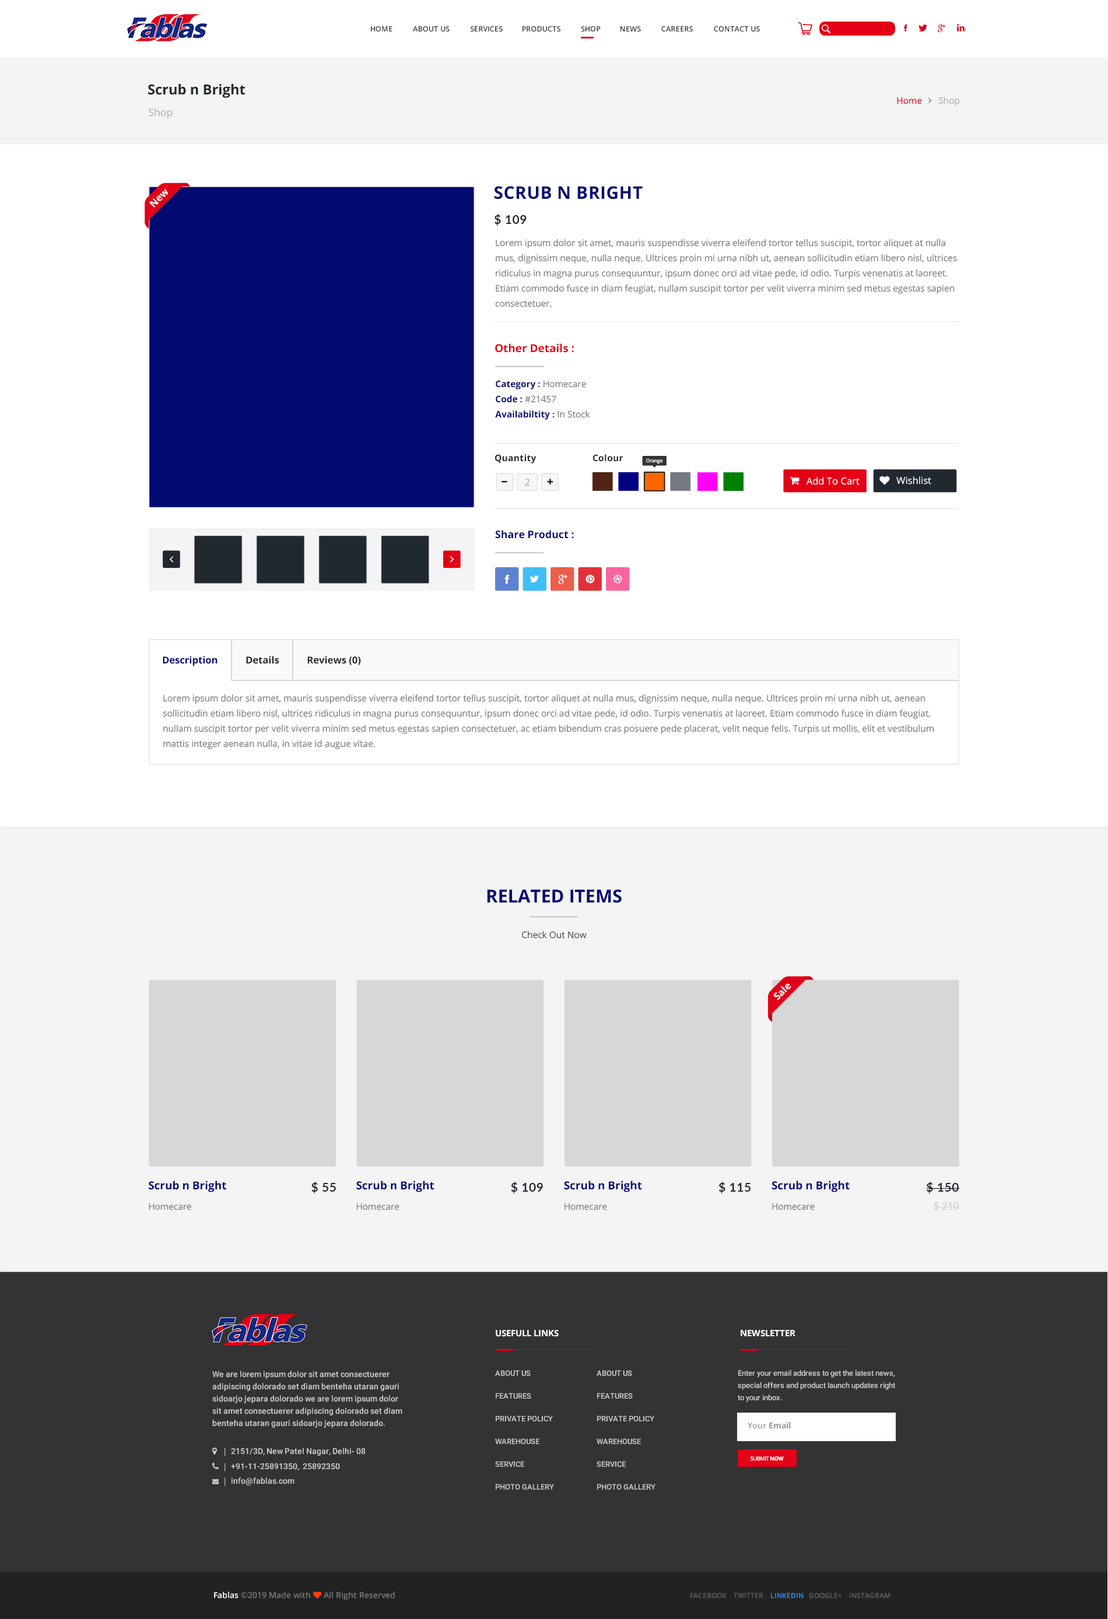
<style>
.page{position:relative;width:1108px;height:1619px;background:#ffffff}
.page>*{position:absolute;margin:0}
.t1{font:7.3px "OpenSans-SemiBold";color:#333333}
.t2{font:8px "OpenSans-SemiBold";color:#333333}
.t3{font:13.8px "OpenSans-Bold";color:#202830}
.t4{font:9px "OpenSans";color:#e30016}
.t5{font:9px "OpenSans";color:#afb0b4}
.t6{font:10.4px "OpenSans";color:#afb0b4}
.t7{font:17.3px "OpenSans-Bold";letter-spacing:0.02em;color:#000a71}
.t8{font:9.7px "OpenSans-Bold";color:#ffffff}
.t9{font:12.5px "Lato-Bold";letter-spacing:0.02em;color:#202830;text-transform:uppercase}
.t10{font:9px/15.2px "OpenSans";color:#7a7c82}
.t11{font:11.1px "OpenSans-Bold";color:#e30016}
.t12{font:9px/15.2px "OpenSans-Bold";color:#000a71}
.t13{font:9.7px/15.2px "Lato-Bold";color:#000a71}
.t14{font:9px "OpenSans-Bold";letter-spacing:0.025em;color:#202830}
.t15{font:4.8px "OpenSans";color:#ffffff}
.t16{font:9.7px "OpenSans";color:#acacac}
.t17{font:9.7px "OpenSans";color:#ffffff}
.t18{font:10.4px "OpenSans-Bold";color:#000a71}
.t19{font:9.7px "OpenSans-Bold";color:#202830}
.t20{font:9.7px "OpenSans-Bold";color:#000a71}
.t21{font:18px "OpenSans-Bold";color:#000a71;text-transform:uppercase}
.t22{font:9px "OpenSans";color:#4d5359}
.t23{font:11.1px "OpenSans-Bold";color:#000a71}
.t24{font:12.5px "Lato-Bold";letter-spacing:0.02em;color:#202830}
.t25{font:9px "OpenSans";color:#7a7c82}
.t26{font:9.7px "Lato-Regular";letter-spacing:0.02em;color:#cbcbcb}
.t27{font:8.7px "OpenSans-Bold";color:#ffffff}
.t28{font:8.2px/12.2px "Roboto-Medium";color:#cccccc}
.t29{font:7.6px/22.7px "Roboto-Medium";color:#cccccc}
.t30{font:7.6px/12.1px "Roboto-Medium";color:#cccccc}
.t31{font:8.2px "OpenSans-Bold";color:#999999}
.t32{font:8.2px "OpenSans-SemiBold";color:#999999}
.t33{font:5.4px "OpenSans";letter-spacing:-0.04em;color:#ffffff}
.t34{font:5.4px "OpenSans-Bold";letter-spacing:-0.04em;color:#ffffff}
.t35{font:7px "OpenSans-SemiBold";color:#616161}
.t36{font:7px "OpenSans-SemiBold";color:#2692ff}
</style>
<div class="page">
<p class="t1" style="left:371px;top:26px;width:21px;height:5px">HOME</p>
<p class="t1" style="left:413px;top:26px;width:37px;height:5px"><span class="t2">                     </span>ABOUT US</p>
<p class="t1" style="left:471px;top:26px;width:32px;height:5px"><span class="t2">                                                 </span>SERVICES</p>
<p class="t1" style="left:522px;top:26px;width:38px;height:5px"><span class="t2">                                                                                </span>PRODUCTS</p>
<p class="t1" style="left:581px;top:26px;width:20px;height:5px"><span class="t2">                                                                                                              </span>SHOP</p>
<p class="t1" style="left:620px;top:26px;width:21px;height:5px"><span class="t2">                                                                                                                                   </span>NEWS</p>
<p class="t1" style="left:661px;top:26px;width:32px;height:5px"><span class="t2">                                                                                                                                                          </span>CAREERS</p>
<p class="t1" style="left:714px;top:26px;width:46px;height:5px"><span class="t2">                                                                                                                                                                                       </span>CONTACT US</p>
<p class="t3" style="left:148px;top:84px;width:97px;height:14px">Scrub n Bright</p>
<p class="t4" style="left:897px;top:97px;width:63px;height:9px">Home<span class="t5">       Shop</span></p>
<p class="t6" style="left:149px;top:108px;width:24px;height:11px">Shop</p>
<p class="t7" style="left:494px;top:186px;width:149px;height:13px">SCRUB N BRIGHT</p>
<p class="t8" style="left:149px;top:188px;width:19px;height:20px;rotate:-45deg">New</p>
<p class="t9" style="left:494px;top:214px;width:32px;height:12px">$ 109</p>
<p class="t10" style="left:495px;top:239px;width:462px;height:68px">Lorem ipsum dolor sit amet, mauris suspendisse viverra eleifend tortor tellus suscipit, tortor aliquet at nulla mus, dignissim neque, nulla neque. Ultrices proin mi urna nibh ut, aenean sollicitudin etiam libero nisl, ultrices ridiculus in magna purus consequuntur, ipsum donec orci ad vitae pede, id odio. Turpis venenatis at laoreet. Etiam commodo fusce in diam feugiat, nullam suscipit tortor per velit viverra minim sed metus egestas sapien consectetuer.</p>
<p class="t11" style="left:495px;top:343px;width:79px;height:10px">Other Details :</p>
<p class="t12" style="left:495px;top:380px;width:95px;height:40px">Category <span class="t13">: </span><span class="t10">Homecare<br></span>Code <span class="t13">: </span><span class="t10">#21457<br></span>Availabiltity <span class="t13">: </span><span class="t10">In Stock</span></p>
<p class="t14" style="left:495px;top:454px;width:41px;height:10px">Quantity</p>
<p class="t14" style="left:593px;top:454px;width:30px;height:8px">Colour</p>
<p class="t15" style="left:646px;top:458px;width:17px;height:6px">Orange</p>
<p class="t16" style="left:525px;top:478px;width:5px;height:8px">2</p>
<p class="t17" style="left:806px;top:477px;width:53px;height:8px">Add To Cart</p>
<p class="t17" style="left:896px;top:476px;width:35px;height:9px">Wishlist</p>
<p class="t18" style="left:495px;top:530px;width:79px;height:9px">Share Product :</p>
<p class="t19" style="left:163px;top:656px;width:198px;height:10px"><span class="t20">Description</span>           Details           Reviews (0)</p>
<p class="t10" style="left:163px;top:694px;width:771px;height:55px">Lorem ipsum dolor sit amet, mauris suspendisse viverra eleifend tortor tellus suscipit, tortor aliquet at nulla mus, dignissim neque, nulla neque. Ultrices proin mi urna nibh ut, aenean sollicitudin etiam libero nisl, ultrices ridiculus in magna purus consequuntur, ipsum donec orci ad vitae pede, id odio. Turpis venenatis at laoreet. Etiam commodo fusce in diam feugiat, nullam suscipit tortor per velit viverra minim sed metus egestas sapien consectetuer, ac etiam bibendum cras posuere pede placerat, velit neque felis. Turpis ut mollis, elit et vestibulum mattis integer aenean nulla, in vitae id augue vitae.</p>
<p class="t21" style="left:487px;top:889px;width:135px;height:14px">Related Items</p>
<p class="t22" style="left:522px;top:931px;width:65px;height:8px">Check Out Now</p>
<p class="t8" style="left:774px;top:984px;width:17px;height:16px;rotate:-45deg">Sale</p>
<p class="t23" style="left:149px;top:1181px;width:77px;height:11px">Scrub n Bright</p>
<p class="t9" style="left:311px;top:1182px;width:25px;height:11px">$ 55</p>
<p class="t23" style="left:356px;top:1181px;width:78px;height:11px">Scrub n Bright</p>
<p class="t9" style="left:511px;top:1182px;width:32px;height:11px">$ 109</p>
<p class="t23" style="left:564px;top:1181px;width:78px;height:11px">Scrub n Bright</p>
<p class="t9" style="left:718px;top:1182px;width:32px;height:11px">$ 115</p>
<p class="t23" style="left:771px;top:1181px;width:78px;height:11px">Scrub n Bright</p>
<p class="t24" style="left:926px;top:1182px;width:34px;height:11px">$ 150</p>
<p class="t25" style="left:149px;top:1203px;width:43px;height:7px">Homecare</p>
<p class="t25" style="left:356px;top:1203px;width:43px;height:7px">Homecare</p>
<p class="t25" style="left:564px;top:1203px;width:43px;height:7px">Homecare</p>
<p class="t25" style="left:772px;top:1203px;width:43px;height:7px">Homecare</p>
<p class="t26" style="left:933px;top:1201px;width:27px;height:10px">$ 210</p>
<p class="t27" style="left:496px;top:1330px;width:63px;height:7px">USEFULL LINKS</p>
<p class="t27" style="left:740px;top:1330px;width:55px;height:7px">NEWSLETTER</p>
<p class="t28" style="left:212px;top:1371px;width:190px;height:57px">We are lorem ipsum dolor sit amet consectuerer adipiscing dolorado set diam benteha utaran gauri sidoarjo jepara dolorado we are lorem ipsum dolor sit amet consectuerer adipiscing dolorado set diam benteha utaran gauri sidoarjo jepara dolorado.</p>
<p class="t29" style="left:495px;top:1370px;width:59px;height:120px">ABOUT US<br>FEATURES<br>PRIVATE POLICY<br>WAREHOUSE<br>SERVICE<br>PHOTO GALLERY</p>
<p class="t29" style="left:596px;top:1370px;width:59px;height:120px">ABOUT US<br>FEATURES<br>PRIVATE POLICY<br>WAREHOUSE<br>SERVICE<br>PHOTO GALLERY</p>
<p class="t30" style="left:738px;top:1370px;width:157px;height:32px">Enter your email address to get the latest news, special offers and product launch updates right to your inbox.</p>
<p class="t31" style="left:747px;top:1422px;width:44px;height:7px"><span class="t32">Your </span>Email</p>
<p class="t33" style="left:750px;top:1456px;width:34px;height:5px">SUBMIT <span class="t34">NOW</span></p>
<p class="t35" style="left:690px;top:1593px;width:200px;height:5px">FACEBOOK    TWITTER    <span class="t36">LINKEDIN</span>   GOOGLE+    INSTAGRAM</p>
</div>
